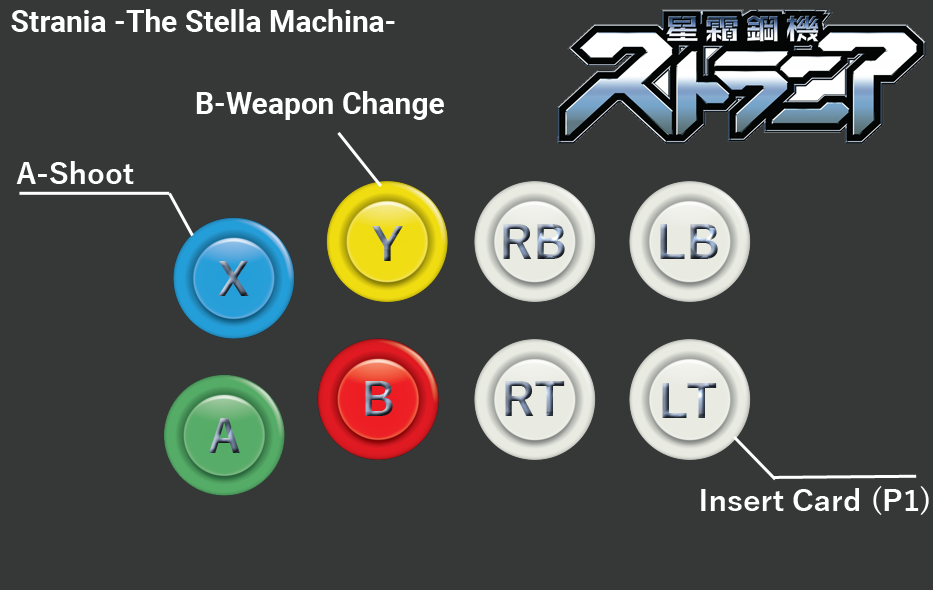
<style>
.page{position:relative;width:933px;height:590px;background:#363838}
.page>*{position:absolute;margin:0}
.t1{font:30px "Roboto-Bold";color:#ffffff}
.t2{font:30px "YuGothic-Bold";color:#ffffff}
</style>
<div class="page">
<p class="t1" style="left:11px;top:9px;width:384px;height:23px">Strania -The Stella Machina-</p>
<p class="t1" style="left:196px;top:91px;width:248px;height:29px">B-Weapon Change</p>
<p class="t2" style="left:16px;top:161px;width:118px;height:23px">A-Shoot</p>
<p class="t2" style="left:701px;top:486px;width:228px;height:29px">Insert Card (P1)</p>
</div>
